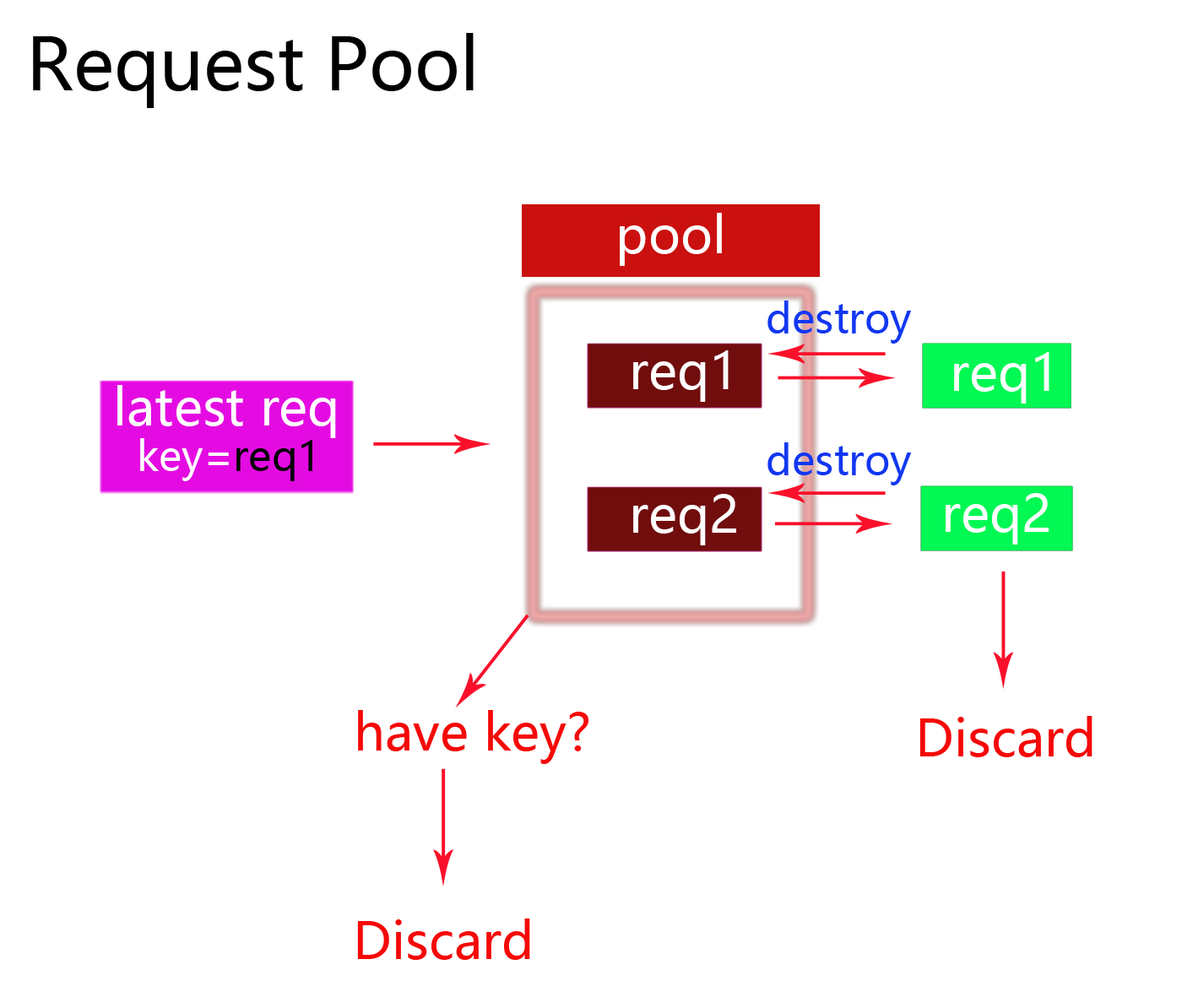
<style>
.page{position:relative;width:1182px;height:1008px;background:#ffffff}
.page>*{position:absolute;margin:0}
.t1{font:71.7px "MicrosoftYaHei";color:#000000}
.t2{font:50.7px "MicrosoftYaHei";color:#ffffff}
.t3{font:40.5px "MicrosoftYaHei";color:#1237f2}
.t4{font:40.5px "MicrosoftYaHei";color:#ffffff}
.t5{font:40.5px "MicrosoftYaHei";color:#000000}
.t6{font:50.7px "MicrosoftYaHei";color:#f50808}
</style>
<div class="page">
<p class="t1" style="left:33px;top:33px;width:441px;height:75px">Request Pool</p>
<p class="t2" style="left:620px;top:213px;width:102px;height:53px">pool</p>
<p class="t3" style="left:768px;top:301px;width:144px;height:43px">destroy</p>
<p class="t2" style="left:633px;top:351px;width:96px;height:51px">req1</p>
<p class="t2" style="left:954px;top:352px;width:96px;height:52px">req1</p>
<p class="t2" style="left:117px;top:385px;width:219px;height:53px">latest req</p>
<p class="t4" style="left:140px;top:438px;width:173px;height:43px">key=<span class="t5">req1</span></p>
<p class="t3" style="left:768px;top:443px;width:144px;height:43px">destroy</p>
<p class="t2" style="left:633px;top:494px;width:103px;height:52px">req2</p>
<p class="t2" style="left:946px;top:493px;width:103px;height:52px">req2</p>
<p class="t6" style="left:358px;top:710px;width:231px;height:54px">have key?</p>
<p class="t6" style="left:920px;top:716px;width:173px;height:42px">Discard</p>
<p class="t6" style="left:357px;top:919px;width:173px;height:41px">Discard</p>
</div>
